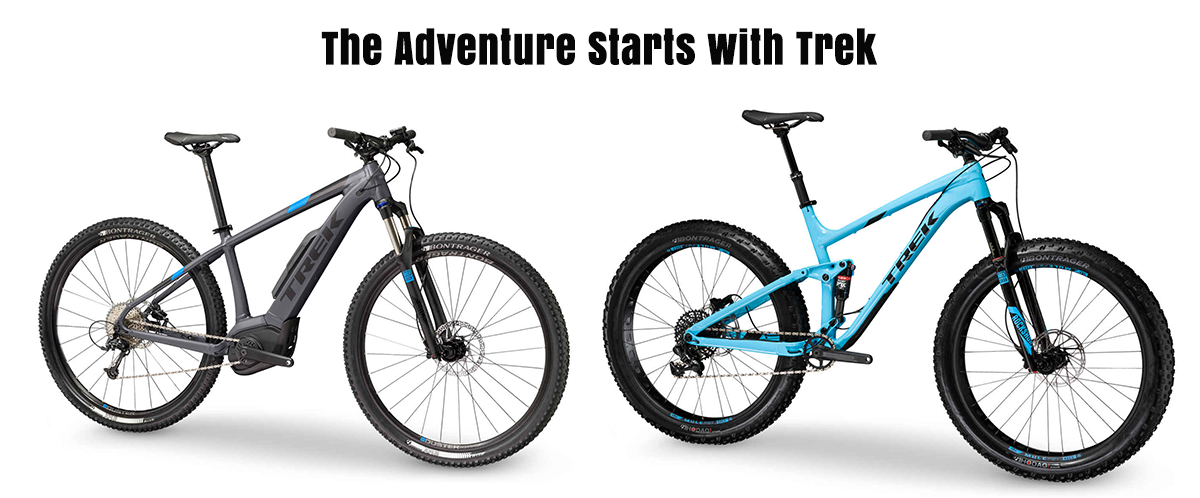
<style>
.page{position:relative;width:1200px;height:498px;background:#ffffff}
.page>*{position:absolute;margin:0}
.t1{font:41.7px "Anton";color:#070707;font-weight:bold}
</style>
<div class="page">
<p class="t1" style="left:321px;top:28px;width:556px;height:38px">The Adventure Starts with Trek</p>
</div>
